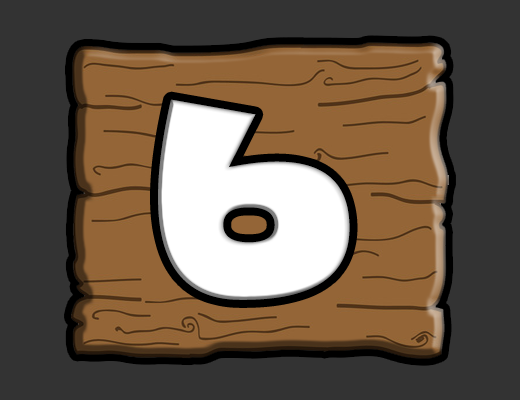
<style>
.page{position:relative;width:520px;height:400px;background:#333333}
.page>*{position:absolute;margin:0}
.t1{font:300px "Funhouse";color:#ffffff}
</style>
<div class="page">
<p class="t1" style="left:158px;top:99px;width:192px;height:201px">6</p>
</div>
